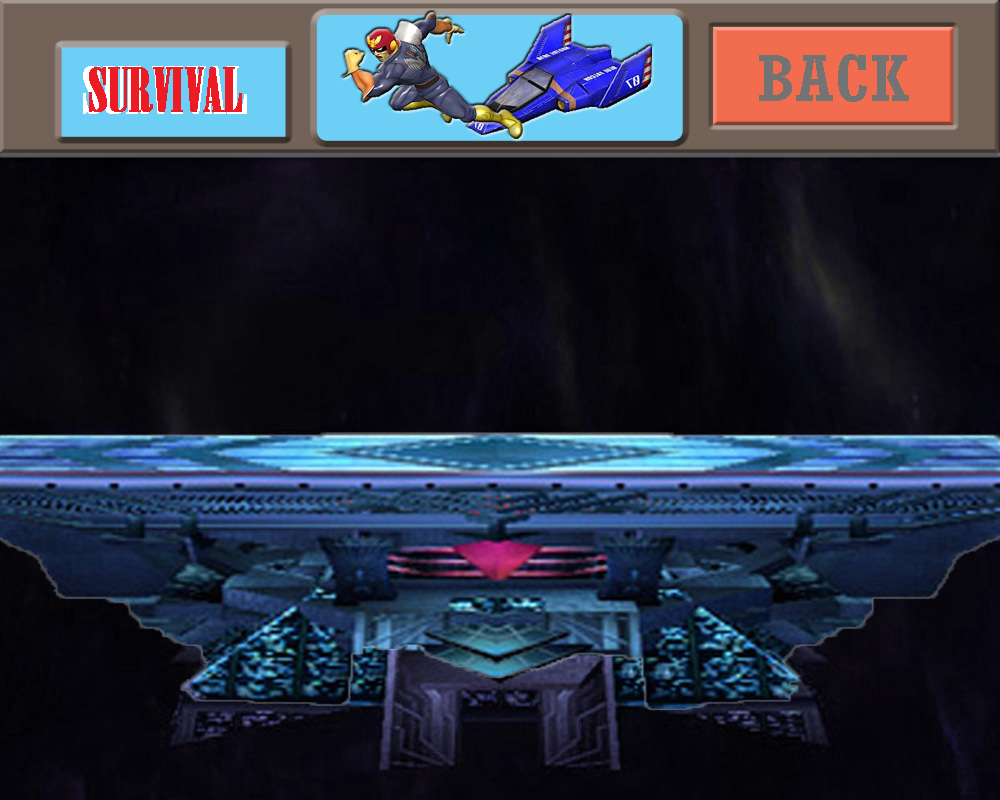
<style>
.page{position:relative;width:1000px;height:800px}
.page>*{position:absolute;margin:0}
.t1{font:62.6px "Onyx";font-weight:bold}
.t2{font:59.8px "Onyx";color:#ed1c24;font-weight:bold}
</style>
<div class="page">
<p class="t1" style="left:83px;top:66px;width:164px;height:48px">SURVIVAL</p>
<p class="t2" style="left:89px;top:67px;width:153px;height:45px">SURVIVAL</p>
</div>
